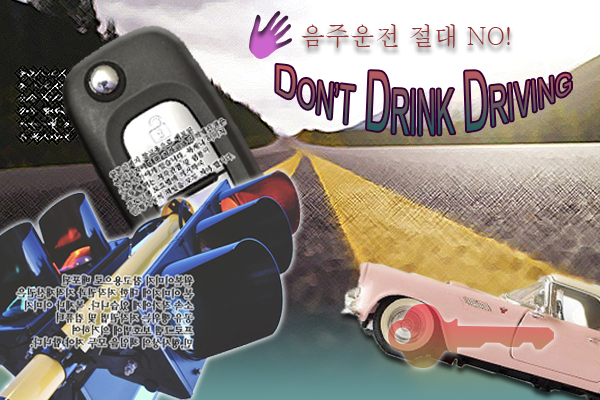
<style>
.page{position:relative;width:600px;height:400px}
.page>*{position:absolute;margin:0}
.t1{font:25px "Batang";color:#993333}
.t2{font:25px/36px "ArialMT"}
.t3{font:35px/36px "ArialMT"}
</style>
<div class="page">
<p class="t1" style="left:301px;top:24px;width:209px;height:24px">음주운전 절대 NO!</p>
<p class="t2" style="left:276px;top:64px;width:295px;height:71px"><span class="t3">D</span>ON’T<span class="t3"> D</span>RINK<span class="t3"> D</span>RIVING</p>
</div>
